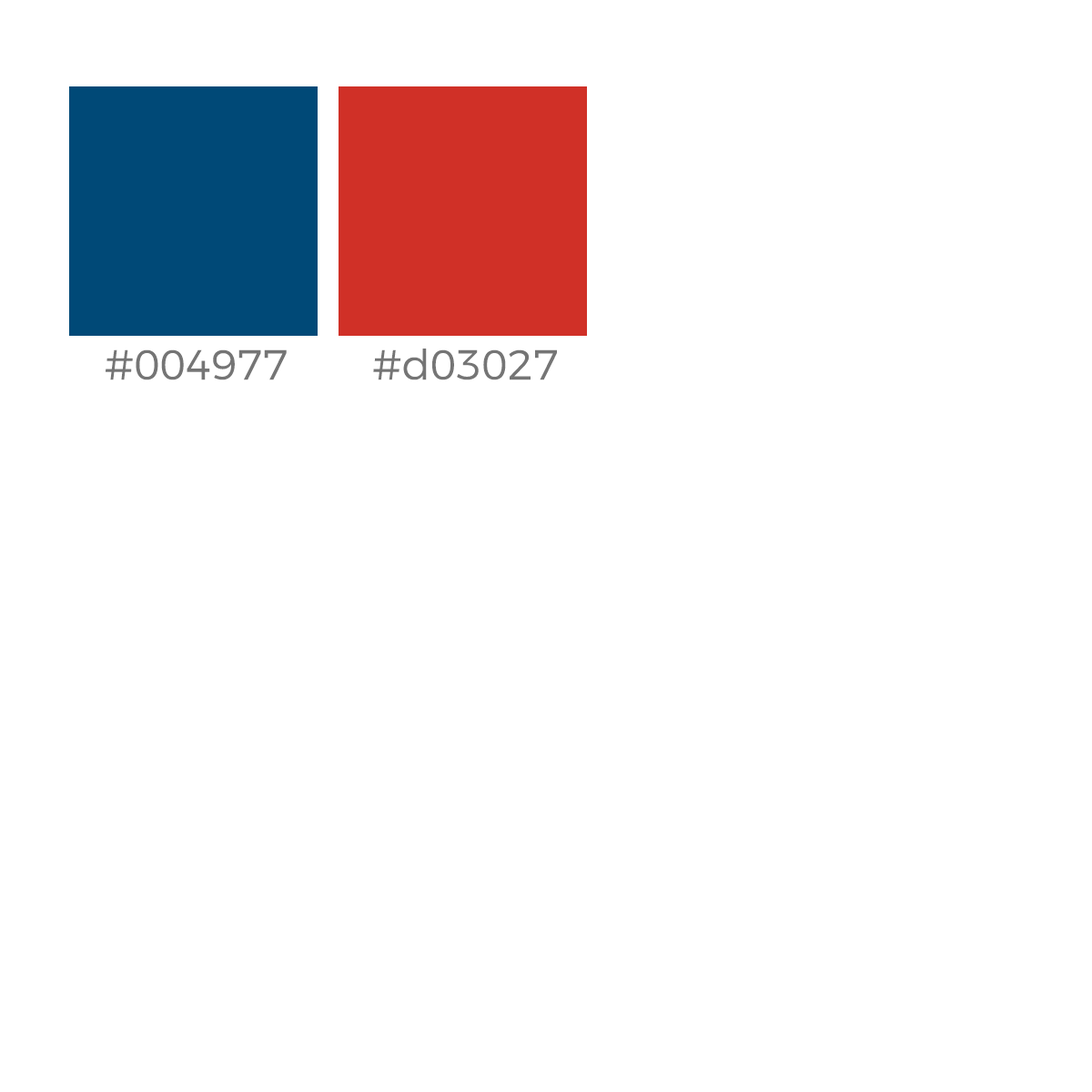
<style>
.page{position:relative;width:1092px;height:1092px;background:#ffffff}
.page>*{position:absolute;margin:0}
.t1{font:41.7px "Montserrat-Light";color:#757575}
</style>
<div class="page">
<p class="t1" style="left:106px;top:349px;width:181px;height:31px">#004977</p>
<p class="t1" style="left:373px;top:349px;width:184px;height:31px">#d03027</p>
</div>
